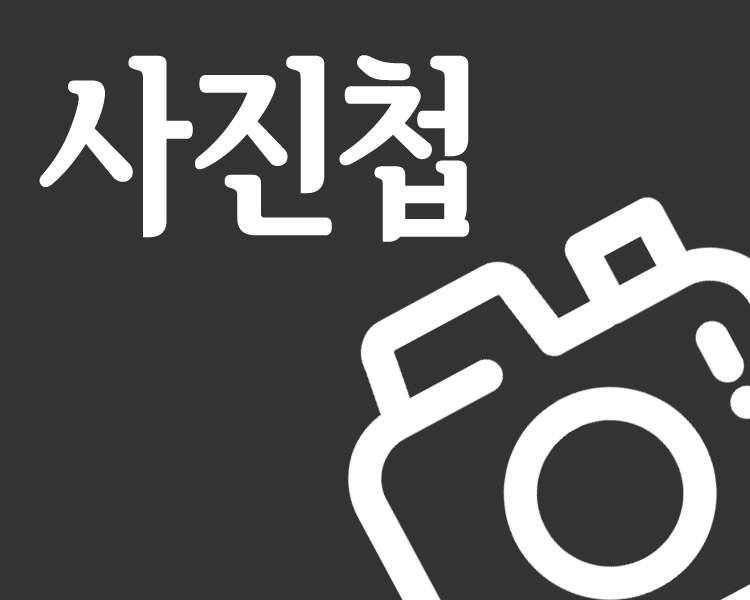
<style>
.page{position:relative;width:750px;height:600px;background:#333333}
.page>*{position:absolute;margin:0}
.t1{font:190px "SeoulHangangCBL";color:#ffffff}
</style>
<div class="page">
<p class="t1" style="left:39px;top:55px;width:431px;height:187px">사진첩</p>
</div>
